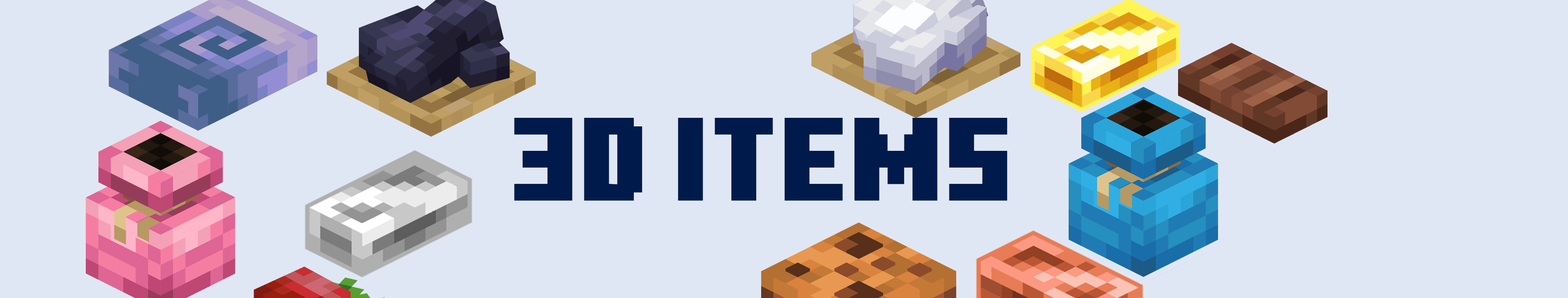
<style>
.page{position:relative;width:1568px;height:298px;background:#e0e7f4}
.page>*{position:absolute;margin:0}
.t1{font:118.5px "MinecraftTen";color:#001a4b}
</style>
<div class="page">
<p class="t1" style="left:514px;top:118px;width:493px;height:83px">3D Items</p>
</div>
